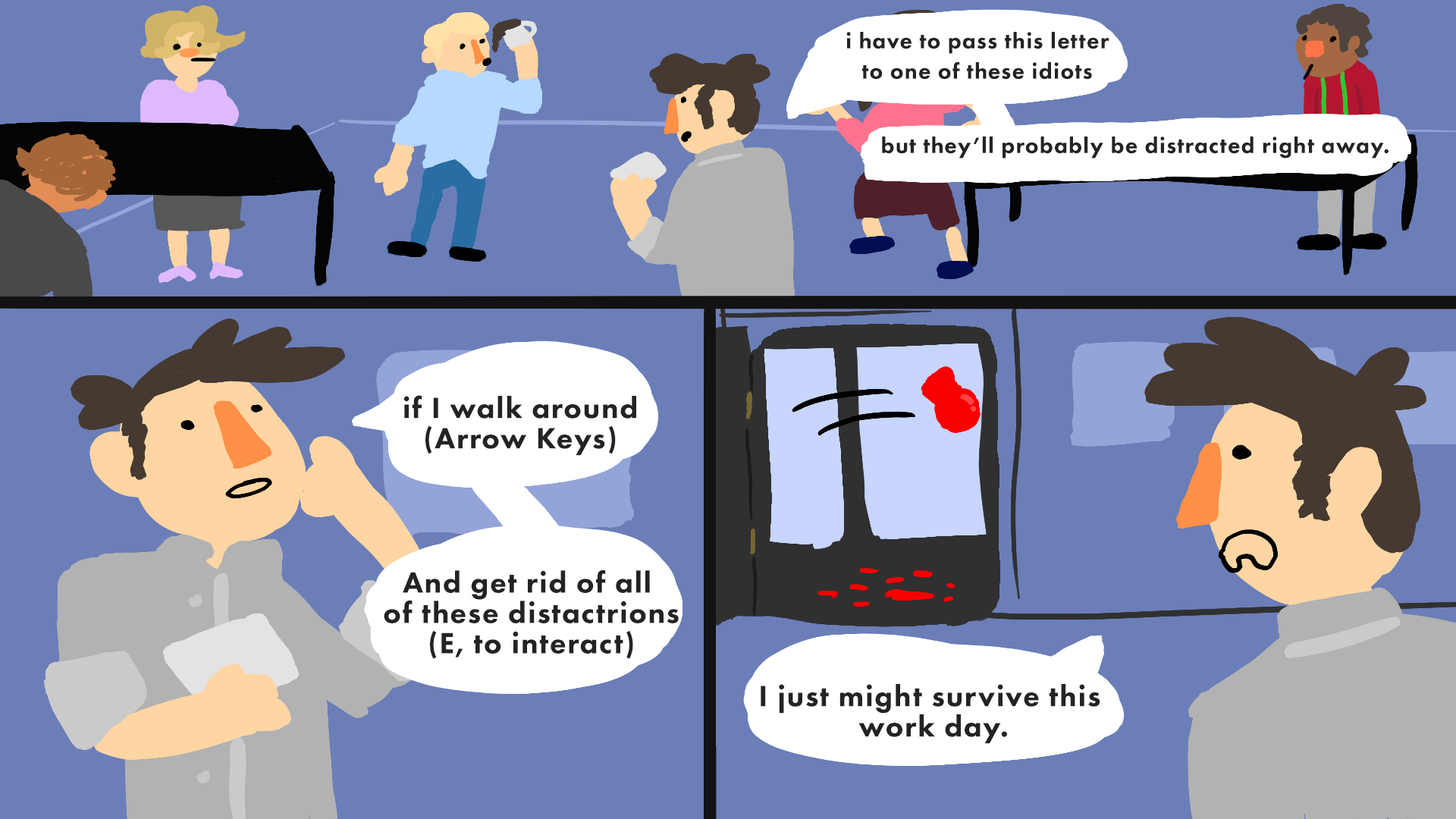
<style>
.page{position:relative;width:1456px;height:819px;background:#6b7eb8}
.page>*{position:absolute;margin:0}
.t1{font:22.7px/30.3px "FuturaPT-Heavy";letter-spacing:0.04em;color:#232323}
.t2{font:22.7px "FuturaPT-Heavy";letter-spacing:0.04em;color:#232323}
.t3{font:30.3px/30.3px "FuturaPT-Heavy";letter-spacing:0.04em;color:#232323}
</style>
<div class="page">
<p class="t1" style="left:846px;top:32px;width:263px;height:48px;text-align:center">i have to pass this letter<br>to one of these idiots</p>
<p class="t2" style="left:882px;top:136px;width:506px;height:22px">but they’ll probably be distracted right away.</p>
<p class="t3" style="left:403px;top:395px;width:233px;height:61px;text-align:center">if I walk around<br>(Arrow Keys)</p>
<p class="t3" style="left:384px;top:570px;width:295px;height:89px;text-align:center">And get rid of all <br>of these distactrions<br>(E, to interact)</p>
<p class="t3" style="left:761px;top:684px;width:339px;height:60px;text-align:center">I just might survive this <br>work day.</p>
</div>
